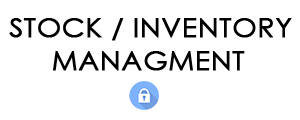
<style>
.page{position:relative;width:300px;height:120px;background:#ffffff}
.page>*{position:absolute;margin:0}
.t1{font:27.3px "CenturyGothic";color:#000000;font-weight:bold;scale:1.03 1}
</style>
<div class="page">
<p class="t1" style="left:9px;top:18px;width:283px;height:53px">STOCK / INVENTORY<br>     MANAGMENT</p>
</div>
